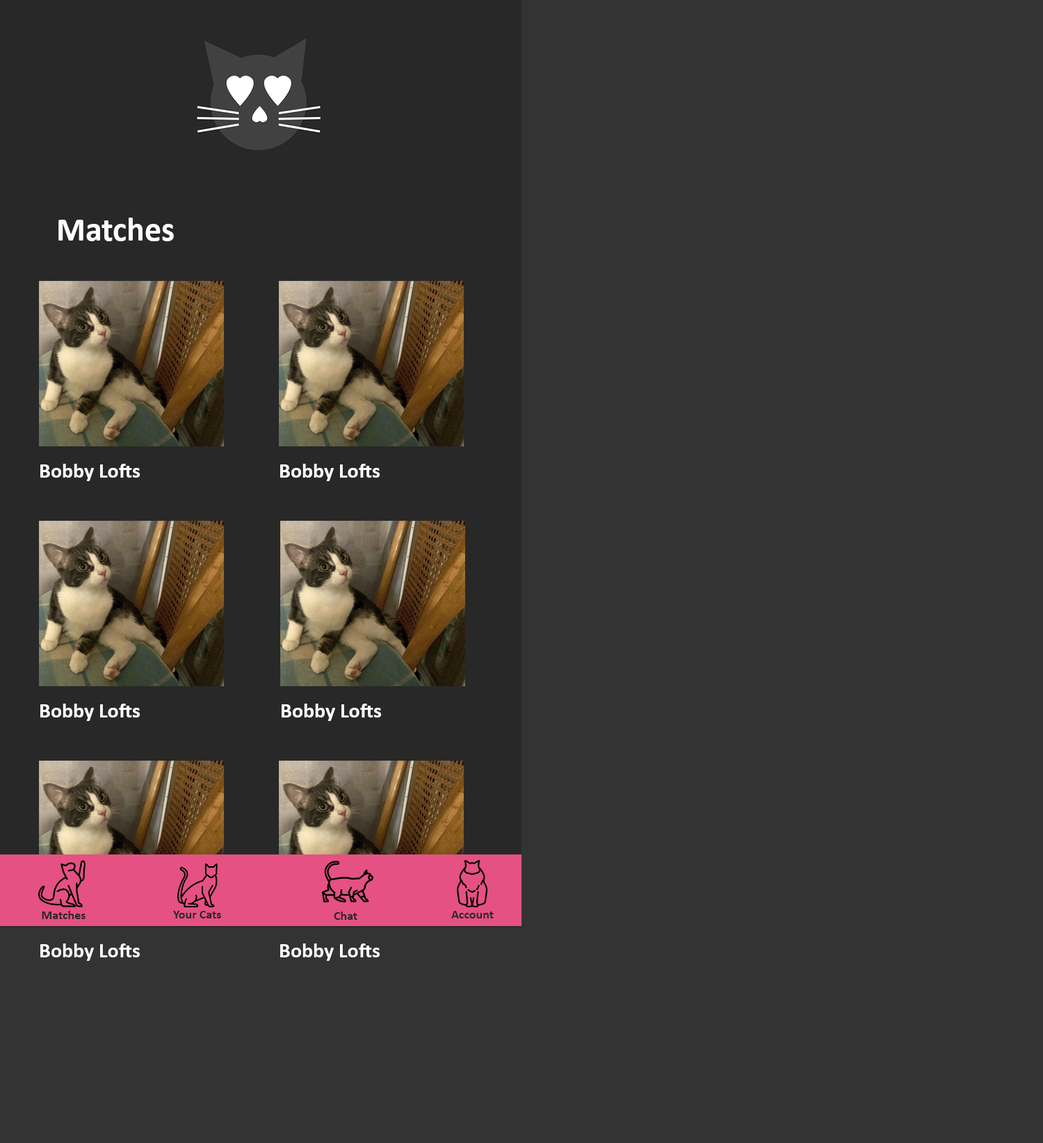
<style>
.page{position:relative;width:1043px;height:1143px;background:#333333}
.page>*{position:absolute;margin:0}
.t1{font:33.4px "Calibri-Bold";color:#ffffff}
.t2{font:20.9px "Calibri-Bold";color:#ffffff}
.t3{font:12.5px "Calibri-Bold";color:#282828}
</style>
<div class="page">
<p class="t1" style="left:58px;top:218px;width:116px;height:23px">Matches</p>
<p class="t2" style="left:40px;top:464px;width:100px;height:17px">Bobby Lofts</p>
<p class="t2" style="left:280px;top:464px;width:100px;height:17px">Bobby Lofts</p>
<p class="t2" style="left:40px;top:704px;width:100px;height:17px">Bobby Lofts</p>
<p class="t2" style="left:282px;top:704px;width:99px;height:17px">Bobby Lofts</p>
<p class="t3" style="left:42px;top:911px;width:44px;height:8px">Matches</p>
<p class="t3" style="left:173px;top:911px;width:48px;height:8px">Your Cats</p>
<p class="t3" style="left:334px;top:912px;width:23px;height:8px">Chat</p>
<p class="t3" style="left:451px;top:911px;width:43px;height:8px">Account</p>
<p class="t2" style="left:40px;top:944px;width:100px;height:17px">Bobby Lofts</p>
<p class="t2" style="left:280px;top:944px;width:100px;height:17px">Bobby Lofts</p>
</div>
